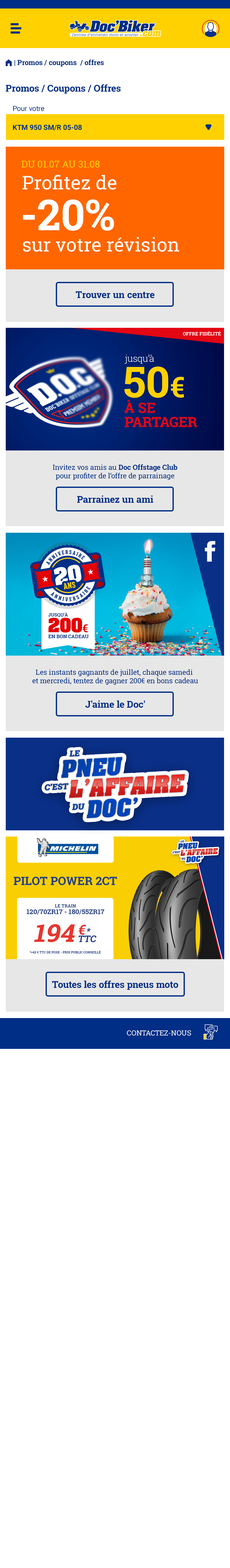
<style>
.page{position:relative;width:230px;height:1568px;background:#ffffff}
.page>*{position:absolute;margin:0}
.t1{font:7.1px "RobotoSlab-Bold";color:#002e86}
.t2{font:7.1px "FoundationIconsGeneral-Reg";color:#002e86}
.t3{font:9.5px "RobotoSlab-Bold";color:#002e86}
.t4{font:7.1px/18.9px "Roboto-Bold";color:#002e86}
.t5{font:7.1px "Roboto-Regular";color:#002e86}
.t6{font:9.5px "RobotoSlab-Regular";color:#ffd100}
.t7{font:18.9px "RobotoSlab-Regular";color:#ffffff}
.t8{font:42.6px "RobotoSlab-Bold";color:#ffffff}
.t9{font:4.7px "RobotoSlab-Bold";color:#ffffff;text-transform:uppercase}
.t10{font:9.5px "RobotoSlab-Light";color:#ffffff}
.t11{font:42.6px "RobotoSlab-Bold";color:#ffd100}
.t12{font:28.4px "RobotoSlab-Bold";color:#ffd100}
.t13{font:14.2px/14.2px "RobotoSlab-Bold";color:#e30613;text-transform:uppercase}
.t14{font:7.1px "RobotoSlab-Regular";color:#002e86}
.t15{font:4.6px "RobotoSlab-Bold";color:#002f87;text-transform:uppercase}
.t16{font:16.5px "Aachen-Bold";color:#e60000}
.t17{font:11px "RobotoSlab-Bold";color:#e60000}
.t18{font:4.9px "RobotoSlab-Bold";color:#002f87;text-transform:uppercase}
.t19{font:7.1px "RobotoSlab-Regular";color:#ffffff;text-transform:uppercase}
</style>
<div class="page">
<p class="t1" style="left:6px;top:59px;width:98px;height:8px"><span class="t2">m </span>| Promos / coupons  / offres</p>
<p class="t3" style="left:6px;top:84px;width:115px;height:10px">Promos / Coupons / Offres</p>
<p class="t4" style="left:13px;top:106px;width:69px;height:24px"><span class="t5">Pour votre<br></span>KTM 950 SM/R 05-08</p>
<p class="t6" style="left:21px;top:161px;width:78px;height:7px">DU 01.07 AU 31.08</p>
<p class="t7" style="left:23px;top:175px;width:93px;height:15px">Profitez de</p>
<p class="t8" style="left:23px;top:199px;width:91px;height:32px">-20%</p>
<p class="t7" style="left:23px;top:237px;width:156px;height:15px">sur votre révision</p>
<p class="t3" style="left:75px;top:291px;width:79px;height:7px">Trouver un centre</p>
<p class="t9" style="left:183px;top:331px;width:37px;height:5px">Offre fidélité</p>
<p class="t10" style="left:124px;top:355px;width:30px;height:9px">jusqu’à</p>
<p class="t11" style="left:124px;top:366px;width:60px;height:32px">50<span class="t12">€</span></p>
<p class="t13" style="left:124px;top:400px;width:73px;height:27px">à se <br>partager</p>
<p class="t14" style="left:53px;top:464px;width:124px;height:16px;text-align:center">Invitez vos amis au <span class="t1">Doc Offstage Club<br></span>pour profiter de l’offre de parrainage</p>
<p class="t3" style="left:77px;top:496px;width:76px;height:7px">Parrainez un ami</p>
<p class="t15" style="left:48px;top:612px;width:20px;height:5px">JUSQU'À</p>
<p class="t16" style="left:48px;top:618px;width:40px;height:15px">200<span class="t17">€</span></p>
<p class="t18" style="left:48px;top:635px;width:40px;height:3px">EN bon cadeau</p>
<p class="t14" style="left:32px;top:669px;width:166px;height:16px;text-align:center">Les instants gagnants de juillet, chaque samedi <br>et mercredi, tentez de gagner 200€ en bons cadeau</p>
<p class="t3" style="left:85px;top:700px;width:60px;height:8px">J'aime le Doc'</p>
<p class="t3" style="left:52px;top:980px;width:126px;height:10px">Toutes les offres pneus moto</p>
<p class="t19" style="left:127px;top:1030px;width:64px;height:6px">contactez-nous</p>
</div>
